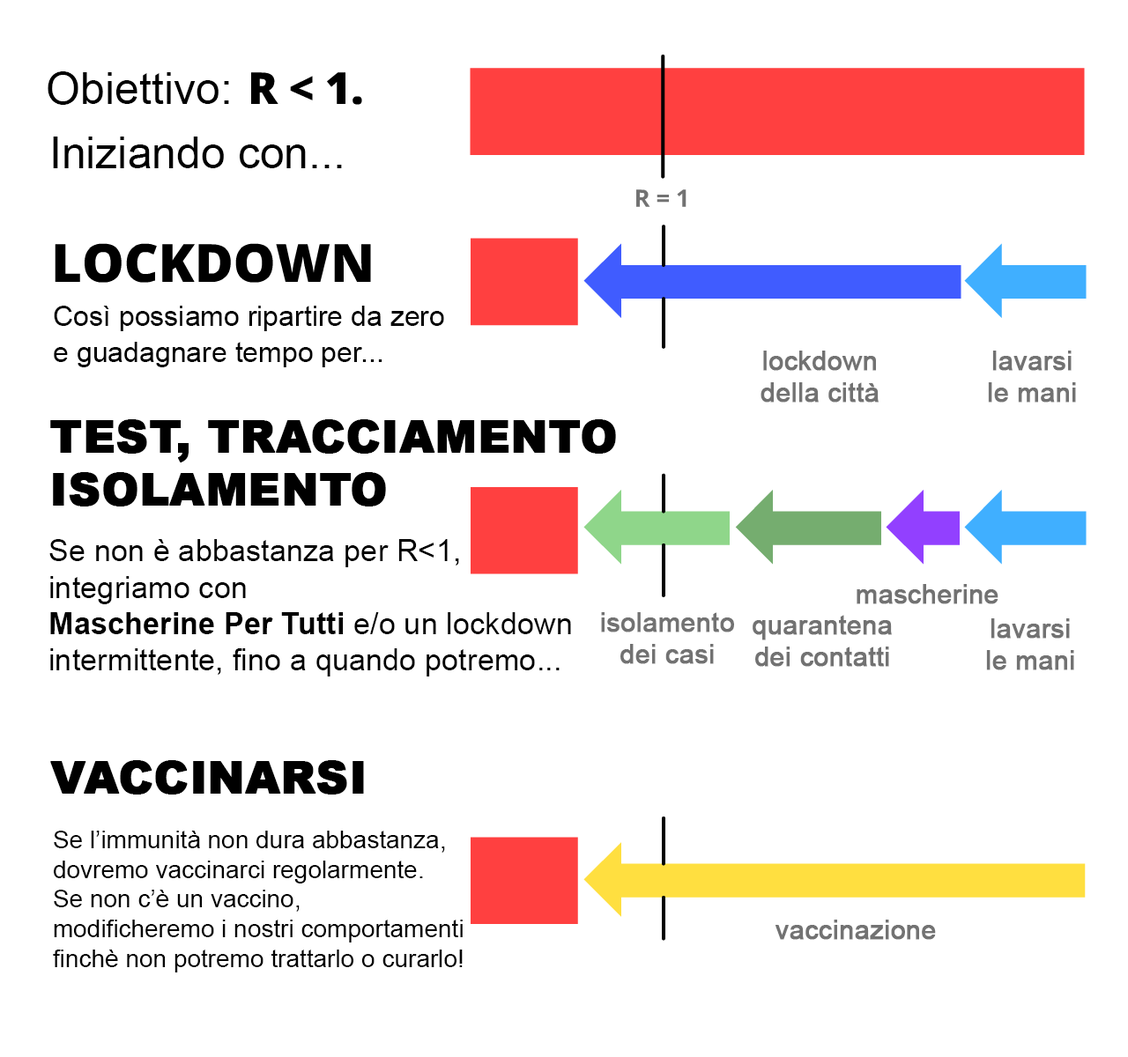
<style>
.page{position:relative;width:1128px;height:1057px;background:#ffffff}
.page>*{position:absolute;margin:0}
.t1{font:44.1px "ArialMT";color:#000000}
.t2{font:28.2px/36.1px "ArialMT";color:#000000}
.t3{font:26.4px "ArialMT";color:#727272;font-weight:bold}
.t4{font:44.1px "Arial-Black";color:#000000;font-weight:bold}
.t5{font:30.4px "ArialMT";color:#000000}
.t6{font:30.4px "Arial-BoldMT";color:#000000}
.t7{font:24.7px "ArialMT";color:#000000}
</style>
<div class="page">
<p class="t1" style="left:48px;top:71px;width:181px;height:34px">Obiettivo:</p>
<p class="t1" style="left:53px;top:137px;width:289px;height:31px">Iniziando con...</p>
<p class="t2" style="left:54px;top:306px;width:390px;height:61px">Così possiamo ripartire da zero<br>e guadagnare tempo per...</p>
<p class="t3" style="left:760px;top:351px;width:118px;height:52px;text-align:center">lockdown<br>della città</p>
<p class="t3" style="left:988px;top:351px;width:88px;height:52px;text-align:center">lavarsi<br>le mani</p>
<p class="t4" style="left:50px;top:419px;width:566px;height:88px">TEST, TRACCIAMENTO<br>ISOLAMENTO</p>
<p class="t5" style="left:49px;top:539px;width:522px;height:138px">Se non è abbastanza per R&lt;1,<br>integriamo con <br><span class="t6">Mascherine Per Tutti</span> e/o un lockdown <br>intermittente, fino a quando potremo...</p>
<p class="t3" style="left:856px;top:584px;width:142px;height:20px">mascherine</p>
<p class="t3" style="left:601px;top:612px;width:133px;height:52px;text-align:center">isolamento<br>dei casi</p>
<p class="t3" style="left:752px;top:615px;width:140px;height:52px;text-align:center">quarantena<br>dei contatti</p>
<p class="t3" style="left:986px;top:619px;width:88px;height:52px;text-align:center">lavarsi<br>le mani</p>
<p class="t4" style="left:50px;top:760px;width:314px;height:35px">VACCINARSI</p>
<p class="t7" style="left:53px;top:831px;width:410px;height:142px">Se l’immunità non dura abbastanza,<br>dovremo vaccinarci regolarmente.<br>Se non c’è un vaccino,<br>modificheremo i nostri comportamenti<br>finchè non potremo trattarlo o curarlo!</p>
<p class="t3" style="left:775px;top:920px;width:161px;height:20px">vaccinazione</p>
</div>
